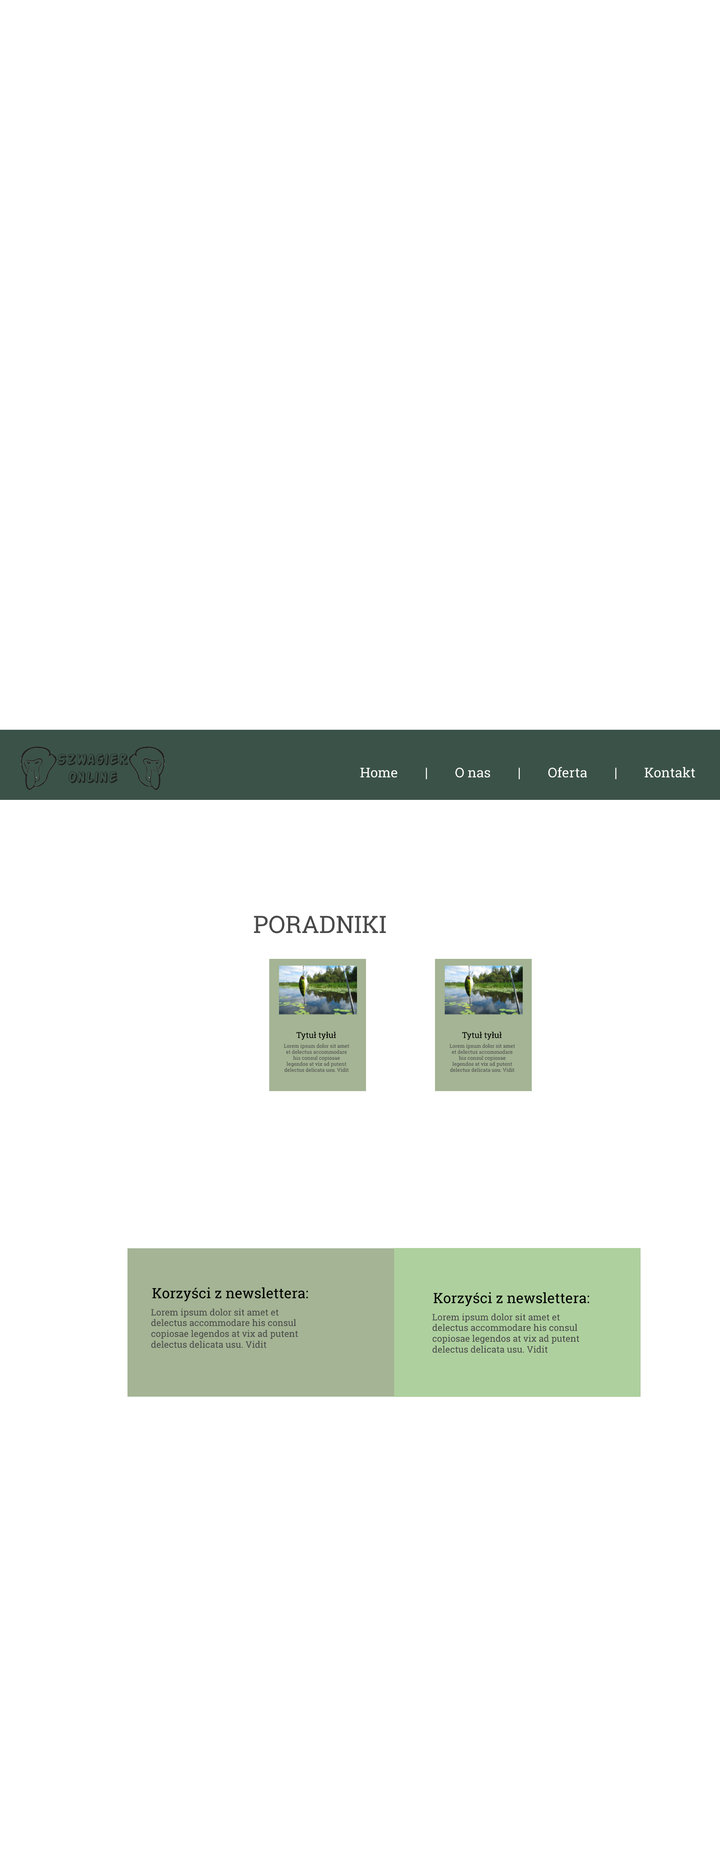
<style>
.page{position:relative;width:720px;height:1875px;background:#ffffff}
.page>*{position:absolute;margin:0}
.t1{font:13.5px "RobotoSlab-Regular";color:#ffffff}
.t2{font:24px "RobotoSlab-Regular";color:#494949}
.t3{font:8.2px "RobotoSlab-Regular";color:#000000}
.t4{font:5px "RobotoSlab-Regular";color:#494949}
.t5{font:14.3px "RobotoSlab-Regular";color:#000000}
.t6{font:9px "RobotoSlab-Regular";color:#494949}
</style>
<div class="page">
<p class="t1" style="left:360px;top:767px;width:335px;height:12px">Home | O nas | Oferta | Kontakt</p>
<p class="t2" style="left:254px;top:915px;width:132px;height:18px">PORADNIKI</p>
<p class="t3" style="left:296px;top:1032px;width:40px;height:8px">Tytuł tyłuł</p>
<p class="t3" style="left:462px;top:1032px;width:40px;height:8px">Tytuł tyłuł</p>
<p class="t4" style="left:284px;top:1044px;width:65px;height:28px;text-align:center">Lorem ipsum dolor sit amet et delectus accommodare his consul copiosae legendos at vix ad putent delectus delicata usu. Vidit</p>
<p class="t4" style="left:450px;top:1044px;width:65px;height:28px;text-align:center">Lorem ipsum dolor sit amet et delectus accommodare his consul copiosae legendos at vix ad putent delectus delicata usu. Vidit</p>
<p class="t5" style="left:152px;top:1287px;width:156px;height:15px">Korzyści z newslettera:</p>
<p class="t5" style="left:434px;top:1292px;width:155px;height:15px">Korzyści z newslettera:</p>
<p class="t6" style="left:151px;top:1308px;width:147px;height:40px">Lorem ipsum dolor sit amet et <br>delectus accommodare his consul copiosae legendos at vix ad putent delectus delicata usu. Vidit</p>
<p class="t6" style="left:432px;top:1313px;width:147px;height:40px">Lorem ipsum dolor sit amet et <br>delectus accommodare his consul copiosae legendos at vix ad putent delectus delicata usu. Vidit</p>
</div>
